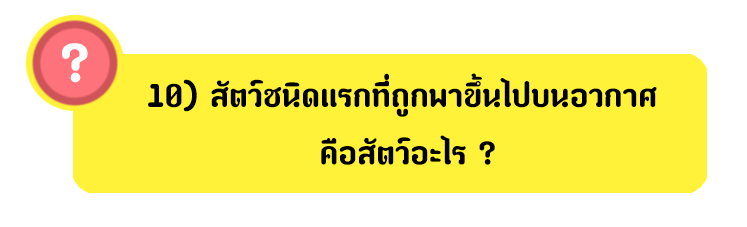
<style>
.page{position:relative;width:747px;height:227px;background:#ffffff}
.page>*{position:absolute;margin:0}
.t1{font:80px "paaymaay";color:#ffffff}
.t2{font:48px "paaymaay";color:#000000}
</style>
<div class="page">
<p class="t1" style="left:62px;top:43px;width:26px;height:40px">?</p>
<p class="t2" style="left:148px;top:73px;width:509px;height:92px;text-align:center">10) สัตว์ชนิดแรกที่ถูกพาขึ้นไปบนอวกาศ <br>คือสัตว์อะไร ?</p>
</div>
